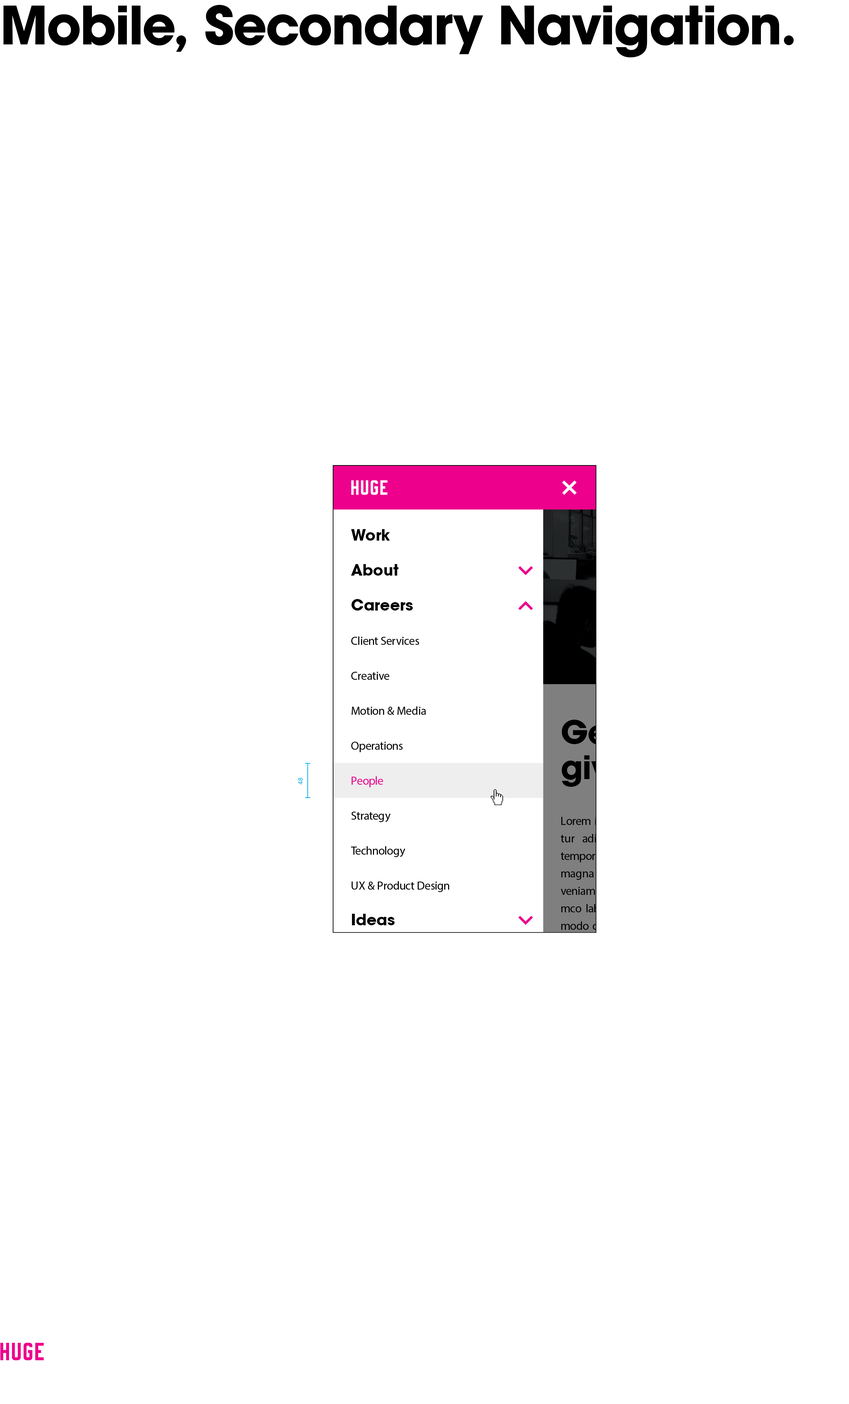
<style>
.page{position:relative;width:849px;height:1404px;background:#ffffff}
.page>*{position:absolute;margin:0}
.t1{font:52.5px "HUGE-AvantGarde-Bold";letter-spacing:-0.026em;color:#000000}
.t2{font:52.5px "HUGE-AvantGarde-Bold";letter-spacing:-0.029em;color:#000000}
.t3{font:52.5px "HUGE-AvantGarde-Bold";letter-spacing:-0.059em;color:#000000}
.t4{font:52.5px "HUGE-AvantGarde-Bold";letter-spacing:-0.014em;color:#000000}
.t5{font:52.5px "HUGE-AvantGarde-Bold";letter-spacing:-0.02em;color:#000000}
.t6{font:52.5px "HUGE-AvantGarde-Bold";letter-spacing:-0.03em;color:#000000}
.t7{font:52.5px "HUGE-AvantGarde-Bold";letter-spacing:-0.033em;color:#000000}
.t8{font:52.5px "HUGE-AvantGarde-Bold";letter-spacing:-0.028em;color:#000000}
.t9{font:52.5px "HUGE-AvantGarde-Bold";letter-spacing:-0.027em;color:#000000}
.t10{font:52.5px "HUGE-AvantGarde-Bold";letter-spacing:-0.025em;color:#000000}
.t11{font:52.5px "HUGE-AvantGarde-Bold";letter-spacing:0.001em;color:#000000}
.t12{font:52.5px "HUGE-AvantGarde-Bold";letter-spacing:-0.037em;color:#000000}
.t13{font:52.5px "HUGE-AvantGarde-Bold";letter-spacing:-0.036em;color:#000000}
.t14{font:52.5px "HUGE-AvantGarde-Bold";letter-spacing:-0.021em;color:#000000}
.t15{font:52.5px "HUGE-AvantGarde-Bold";letter-spacing:-0.019em;color:#000000}
.t16{font:52.5px "HUGE-AvantGarde-Bold";color:#000000}
.t17{font:15.3px "HUGE-AvantGarde-Bold";color:#000000}
.t18{font:15.3px "HUGE-AvantGarde-Bold";letter-spacing:-0.037em;color:#000000}
.t19{font:15.3px "HUGE-AvantGarde-Bold";letter-spacing:-0.002em;color:#000000}
.t20{font:15.3px "HUGE-AvantGarde-Bold";letter-spacing:-0.001em;color:#000000}
.t21{font:15.3px "HUGE-AvantGarde-Bold";letter-spacing:0.007em;color:#000000}
.t22{font:15.3px "HUGE-AvantGarde-Bold";letter-spacing:0.002em;color:#000000}
.t23{font:15.3px "HUGE-AvantGarde-Bold";letter-spacing:0.001em;color:#000000}
.t24{font:15.3px "HUGE-AvantGarde-Bold";letter-spacing:0.012em;color:#000000}
.t25{font:11.7px "GalaxieCopernicus-Book";letter-spacing:-0.027em;color:#000000}
.t26{font:11.7px "GalaxieCopernicus-Book";letter-spacing:-0.004em;color:#000000}
.t27{font:11.7px "GalaxieCopernicus-Book";letter-spacing:-0.01em;color:#000000}
.t28{font:11.7px "GalaxieCopernicus-Book";letter-spacing:-0.039em;color:#000000}
.t29{font:11.7px "GalaxieCopernicus-Book";color:#000000}
.t30{font:11.7px "GalaxieCopernicus-Book";letter-spacing:-0.005em;color:#000000}
.t31{font:11.7px "GalaxieCopernicus-Book";letter-spacing:0.024em;color:#000000}
.t32{font:11.7px "GalaxieCopernicus-Book";letter-spacing:0.004em;color:#000000}
.t33{font:11.7px "GalaxieCopernicus-Book";letter-spacing:-0.006em;color:#000000}
.t34{font:11.7px "GalaxieCopernicus-Book";letter-spacing:-0.002em;color:#000000}
.t35{font:11.7px "GalaxieCopernicus-Book";letter-spacing:-0.013em;color:#000000}
.t36{font:11.7px "GalaxieCopernicus-Book";letter-spacing:-0.021em;color:#000000}
.t37{font:11.7px "GalaxieCopernicus-Book";letter-spacing:-0.009em;color:#000000}
.t38{font:11.7px "GalaxieCopernicus-Book";letter-spacing:-0.032em;color:#000000}
.t39{font:11.7px "GalaxieCopernicus-Book";letter-spacing:-0.003em;color:#000000}
.t40{font:11.7px "GalaxieCopernicus-Book";letter-spacing:-0.026em;color:#000000}
.t41{font:11.7px "GalaxieCopernicus-Book";letter-spacing:-0.031em;color:#000000}
.t42{font:11.7px "GalaxieCopernicus-Book";letter-spacing:-0.022em;color:#000000}
.t43{font:11.7px "GalaxieCopernicus-Book";letter-spacing:-0.035em;color:#000000}
.t44{font:11.7px "GalaxieCopernicus-Book";letter-spacing:-0.025em;color:#000000}
.t45{font:11.7px "GalaxieCopernicus-Book";letter-spacing:0.001em;color:#000000}
.t46{font:11.7px "GalaxieCopernicus-Book";letter-spacing:-0.001em;color:#000000}
.t47{font:11.7px "GalaxieCopernicus-Book";letter-spacing:-0.019em;color:#000000}
.t48{font:11.7px "GalaxieCopernicus-Book";letter-spacing:-0.034em;color:#000000}
.t49{font:11.7px "GalaxieCopernicus-Book";letter-spacing:-0.007em;color:#000000}
.t50{font:6.6px "GalaxieCopernicus-Book";letter-spacing:0.013em;color:#00adef}
.t51{font:6.6px "GalaxieCopernicus-Book";color:#00adef}
.t52{font:11.7px "GalaxieCopernicus-Book";letter-spacing:-0.029em;color:#ec008c}
.t53{font:11.7px "GalaxieCopernicus-Book";letter-spacing:-0.002em;color:#ec008c}
.t54{font:11.7px "GalaxieCopernicus-Book";letter-spacing:-0.024em;color:#ec008c}
.t55{font:11.7px "GalaxieCopernicus-Book";letter-spacing:-0.03em;color:#ec008c}
.t56{font:11.7px "GalaxieCopernicus-Book";letter-spacing:-0.028em;color:#ec008c}
.t57{font:11.7px "GalaxieCopernicus-Book";color:#ec008c}
.t58{font:11.7px "GalaxieCopernicus-Book";letter-spacing:-0.033em;color:#000000}
.t59{font:11.7px "GalaxieCopernicus-Book";letter-spacing:0.022em;color:#000000}
.t60{font:11.7px "GalaxieCopernicus-Book";letter-spacing:-0.136em;color:#000000}
.t61{font:11.7px "GalaxieCopernicus-Book";letter-spacing:-0.03em;color:#000000}
.t62{font:11.7px "GalaxieCopernicus-Book";letter-spacing:-0.029em;color:#000000}
.t63{font:11.7px "GalaxieCopernicus-Book";letter-spacing:-0.008em;color:#000000}
.t64{font:11.7px "GalaxieCopernicus-Book";letter-spacing:-0.02em;color:#000000}
.t65{font:15.3px "HUGE-AvantGarde-Bold";letter-spacing:0.004em;color:#000000}
</style>
<div class="page">
<p class="t1" style="left:3px;top:5px;width:791px;height:52px">M<span class="t2">o</span>bil<span class="t3">e</span><span class="t4">, </span><span class="t5">S</span><span class="t6">e</span><span class="t7">c</span><span class="t2">o</span><span class="t8">n</span><span class="t9">d</span><span class="t10">a</span><span class="t11">r</span><span class="t4">y </span><span class="t10">N</span><span class="t12">a</span><span class="t13">v</span>i<span class="t10">g</span><span class="t14">a</span><span class="t15">t</span><span class="t9">i</span><span class="t2">o</span><span class="t7">n</span><span class="t16">.</span></p>
<p class="t17" style="left:351px;top:529px;width:39px;height:12px"><span class="t18">W</span>ork</p>
<p class="t19" style="left:351px;top:564px;width:48px;height:12px">Ab<span class="t20">o</span><span class="t21">u</span><span class="t17">t</span></p>
<p class="t17" style="left:351px;top:599px;width:62px;height:12px">C<span class="t22">a</span><span class="t23">r</span>ee<span class="t24">r</span>s</p>
<p class="t25" style="left:351px;top:636px;width:68px;height:9px"><span class="t26">C</span><span class="t27">l</span>ie<span class="t28">n</span><span class="t29">t </span><span class="t30">S</span>e<span class="t31">r</span><span class="t32">v</span>i<span class="t33">c</span><span class="t34">e</span><span class="t29">s</span></p>
<p class="t35" style="left:351px;top:672px;width:39px;height:8px">C<span class="t36">r</span><span class="t37">e</span><span class="t38">a</span><span class="t39">t</span><span class="t40">i</span><span class="t41">v</span><span class="t29">e</span></p>
<p class="t29" style="left:352px;top:706px;width:74px;height:9px"><span class="t42">Mo</span><span class="t39">t</span><span class="t41">i</span><span class="t43">o</span>n &amp; <span class="t42">M</span><span class="t34">ed</span><span class="t44">i</span>a</p>
<p class="t45" style="left:351px;top:742px;width:52px;height:10px">O<span class="t46">p</span><span class="t25">e</span><span class="t47">r</span><span class="t38">a</span><span class="t39">t</span><span class="t41">i</span><span class="t48">o</span><span class="t49">n</span><span class="t29">s</span></p>
<p class="t50" style="left:298px;top:778px;width:5px;height:6px">4<span class="t51">8</span></p>
<p class="t52" style="left:352px;top:776px;width:31px;height:11px">P<span class="t53">e</span><span class="t54">o</span><span class="t55">p</span><span class="t56">l</span><span class="t57">e</span></p>
<p class="t25" style="left:351px;top:812px;width:40px;height:10px">S<span class="t39">t</span><span class="t47">r</span><span class="t58">a</span><span class="t40">t</span><span class="t37">e</span><span class="t59">g</span><span class="t29">y</span></p>
<p class="t60" style="left:351px;top:846px;width:55px;height:11px">T<span class="t34">e</span><span class="t25">c</span><span class="t26">h</span><span class="t40">n</span><span class="t61">o</span><span class="t41">l</span><span class="t35">o</span><span class="t59">g</span><span class="t29">y</span></p>
<p class="t29" style="left:352px;top:881px;width:97px;height:11px"><span class="t30">U</span>X &amp; <span class="t39">P</span><span class="t44">r</span><span class="t46">o</span><span class="t62">d</span><span class="t25">u</span><span class="t63">c</span>t <span class="t39">D</span><span class="t34">e</span><span class="t48">s</span><span class="t64">i</span><span class="t26">g</span>n</p>
<p class="t65" style="left:352px;top:914px;width:43px;height:11px">I<span class="t23">d</span><span class="t20">e</span><span class="t21">a</span><span class="t17">s</span></p>
</div>
